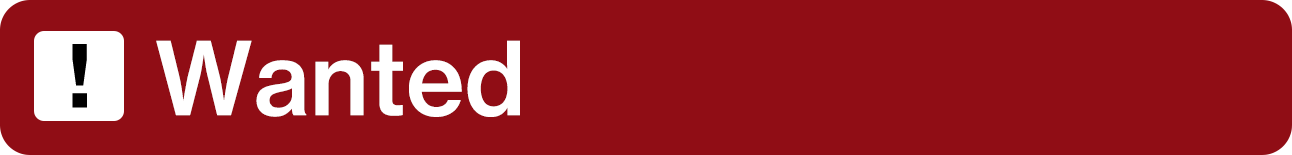
<style>
.page{position:relative;width:1292px;height:155px;background:#900d15}
.page>*{position:absolute;margin:0}
.t1{font:100px "NHaasGroteskTXPro-65Md";color:#ffffff}
</style>
<div class="page">
<p class="t1" style="left:156px;top:40px;width:364px;height:77px">Wanted</p>
</div>
